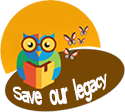
<style>
.page{position:relative;width:125px;height:112px;background:#ffffff}
.page>*{position:absolute;margin:0}
.t1{font:16.7px "Latha";letter-spacing:-0.1em;color:#ffffff}
</style>
<div class="page">
<p class="t1" style="left:13px;top:73px;width:94px;height:32px;rotate:-10deg">Save our legacy</p>
</div>
